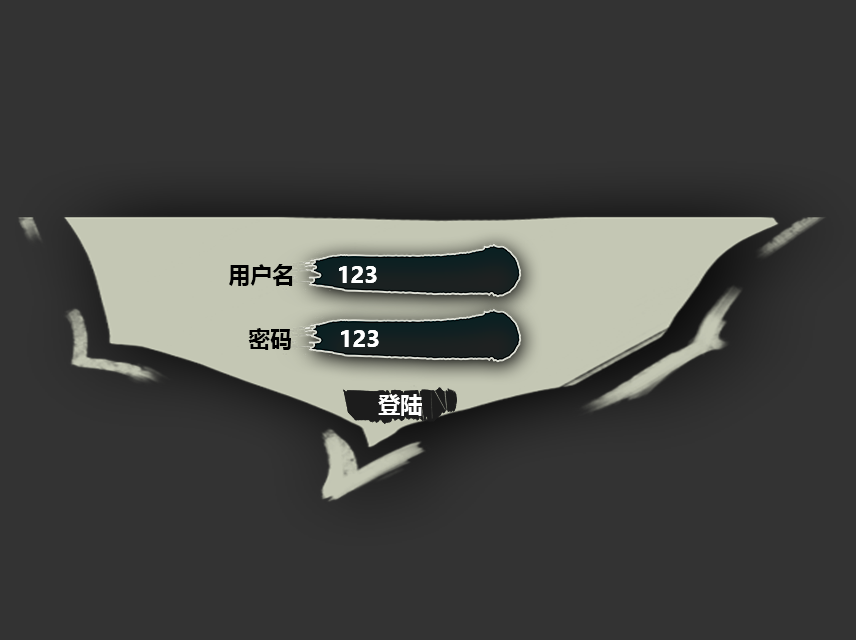
<style>
.page{position:relative;width:856px;height:640px;background:#333333}
.page>*{position:absolute;margin:0}
.t1{font:22px "MicrosoftYaHei-Bold";color:#000000}
.t2{font:22px "MicrosoftYaHei-Bold";color:#ffffff}
</style>
<div class="page">
<p class="t1" style="left:229px;top:264px;width:64px;height:22px">用户名</p>
<p class="t2" style="left:339px;top:266px;width:38px;height:17px">123</p>
<p class="t2" style="left:339px;top:266px;width:38px;height:17px">123</p>
<p class="t1" style="left:248px;top:328px;width:43px;height:22px">密码</p>
<p class="t2" style="left:341px;top:330px;width:38px;height:17px">123</p>
<p class="t2" style="left:341px;top:330px;width:38px;height:17px">123</p>
<p class="t2" style="left:378px;top:394px;width:44px;height:22px">登陆</p>
</div>
